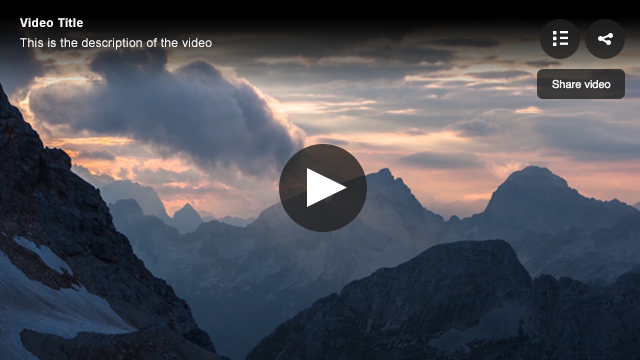
<style>
.page{position:relative;width:640px;height:360px}
.page>*{position:absolute;margin:0}
.t1{font:12px "Arial-BoldMT";letter-spacing:0.025em;color:#ffffff}
.t2{font:12px "ArialMT";letter-spacing:0.025em;color:#ffffff}
.t3{font:11px "Helvetica";color:#eeeeee}
</style>
<div class="page">
<p class="t1" style="left:20px;top:18px;width:63px;height:9px">Video Title</p>
<p class="t2" style="left:20px;top:38px;width:192px;height:12px">This is the description of the video</p>
<p class="t3" style="left:552px;top:79px;width:59px;height:10px">Share video</p>
</div>
